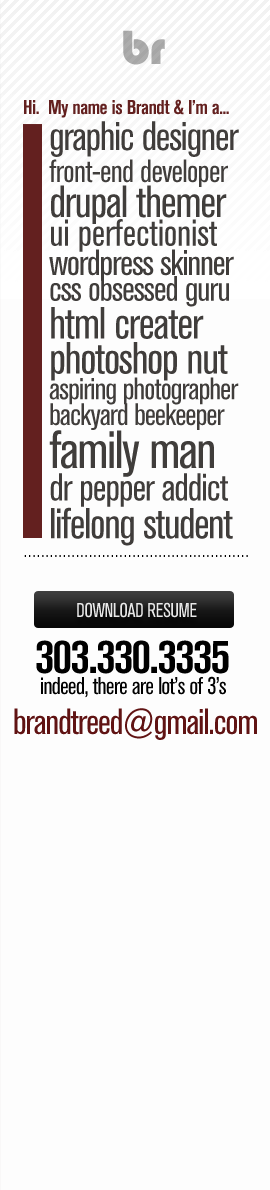
<style>
.page{position:relative;width:270px;height:1190px;background:#fdfdfd}
.page>*{position:absolute;margin:0}
.t1{font:50px "Bauhaus93";letter-spacing:-0.025em;color:#adadad}
.t2{font:20px "AkzidenzGroteskBE-BoldCn";letter-spacing:-0.025em;color:#63201f}
.t3{font:30.9px/25.7px "AkzidenzGroteskBE-Cn";letter-spacing:-0.025em;color:#403d3b}
.t4{font:25.7px/37.7px "AkzidenzGroteskBE-BoldCn";letter-spacing:-0.025em;color:#63201f}
.t5{font:40.6px/38px "AkzidenzGroteskBE-Cn";letter-spacing:-0.025em;color:#403d3b}
.t6{font:32px/32px "AkzidenzGroteskBE-Cn";letter-spacing:-0.02em;color:#403d3b}
.t7{font:44.6px/35.1px "AkzidenzGroteskBE-Cn";letter-spacing:-0.025em;color:#403d3b}
.t8{font:37.9px/28.7px "AkzidenzGroteskBE-Cn";letter-spacing:-0.005em;color:#403d3b}
.t9{font:36px/29.3px "AkzidenzGroteskBE-Cn";letter-spacing:-0.025em;color:#403d3b}
.t10{font:35.1px/25.7px "AkzidenzGroteskBE-Cn";letter-spacing:-0.025em;color:#403d3b}
.t11{font:44.6px/37.7px "AkzidenzGroteskBE-Cn";letter-spacing:-0.025em;color:#403d3b}
.t12{font:53.1px/42.9px "AkzidenzGroteskBE-Cn";letter-spacing:-0.025em;color:#403d3b}
.t13{font:38.6px/32.6px "AkzidenzGroteskBE-Cn";letter-spacing:-0.025em;color:#403d3b}
.t14{font:42.9px/37.7px "AkzidenzGroteskBE-Cn";letter-spacing:-0.025em;color:#403d3b}
.t15{font:21px "AkzidenzGroteskBE-LightEx";letter-spacing:-0.025em;color:#000000;scale:0.84 1}
.t16{font:20px "AkzidenzGroteskBE-Cn";letter-spacing:-0.025em;color:#e9e9e9}
.t17{font:48px "AkzidenzGroteskBE-BoldCn";letter-spacing:-0.025em;color:#000000}
.t18{font:24px "AkzidenzGroteskBE-Cn";letter-spacing:-0.025em;color:#000000}
.t19{font:36px "AkzidenzGroteskBE-Cn";letter-spacing:-0.025em;color:#601313}
</style>
<div class="page">
<p class="t1" style="left:123px;top:30px;width:42px;height:35px">br</p>
<p class="t2" style="left:24px;top:99px;width:205px;height:19px">Hi.  My name is Brandt &amp; I’m a...</p>
<p class="t3" style="left:49px;top:121px;width:190px;height:425px"><span class="t4"><br></span><span class="t5">graphic designer<br></span><span class="t6">front-end developer  <br></span><span class="t7">drupal themer<br></span><span class="t8">ui perfectionist<br></span><span class="t9">wordpress skinner<br></span><span class="t10">css obsessed guru<br></span><span class="t11">html creater<br></span><span class="t7">photoshop nut<br></span>aspiring photographer<br>backyard beekeeper<br><span class="t12">family man<br></span><span class="t13">dr pepper addict<br></span><span class="t14">lifelong student</span></p>
<p class="t15" style="left:24px;top:555px;width:224px;height:2px">....................................................</p>
<p class="t16" style="left:77px;top:602px;width:120px;height:16px">DOWNLOAD RESUME</p>
<p class="t17" style="left:36px;top:640px;width:193px;height:34px">303.330.3335</p>
<p class="t18" style="left:41px;top:676px;width:185px;height:22px">indeed, there are lot’s of 3’s</p>
<p class="t19" style="left:14px;top:708px;width:243px;height:32px">brandtreed@gmail.com</p>
</div>
